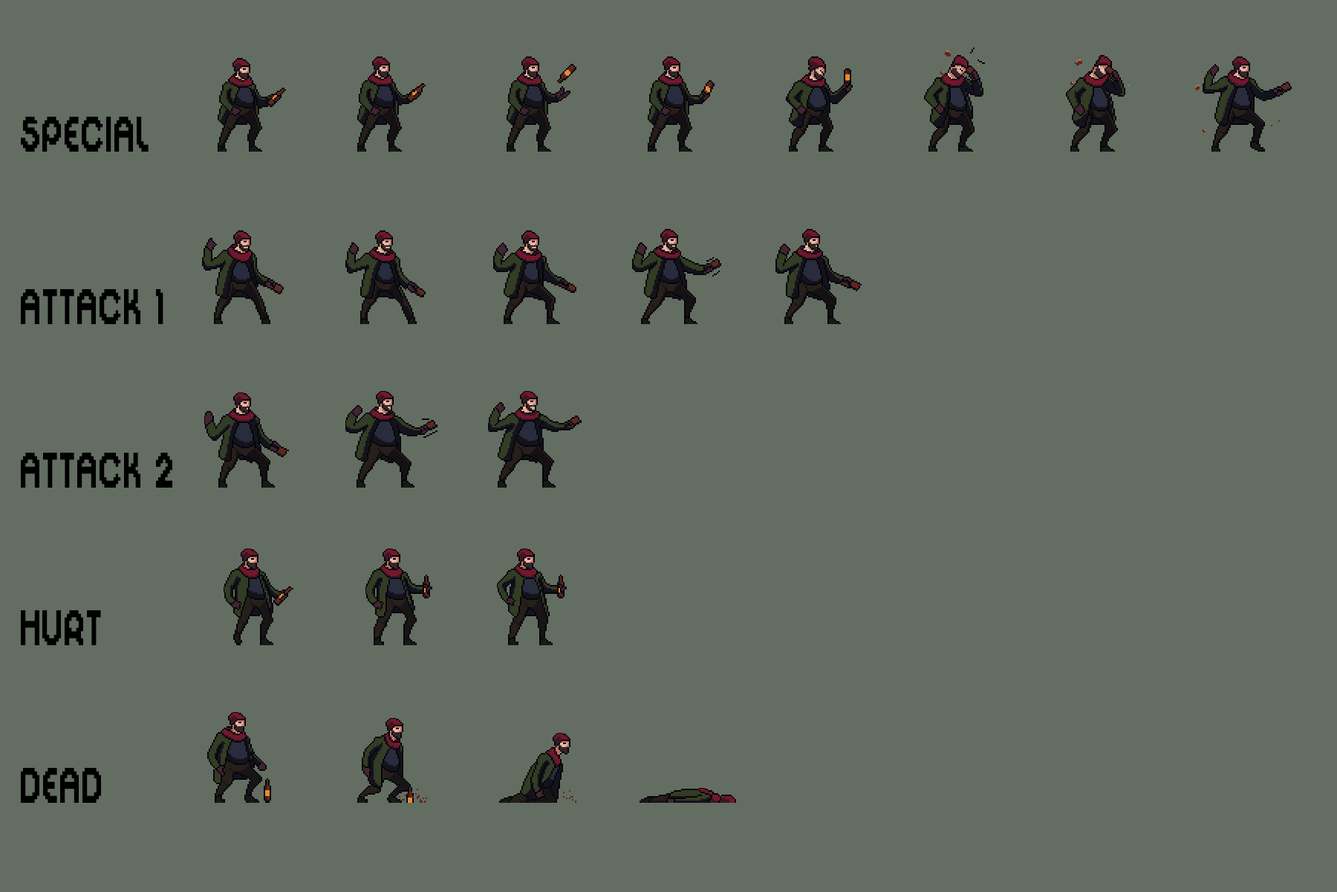
<style>
.page{position:relative;width:1337px;height:892px;background:#636d62}
.page>*{position:absolute;margin:0}
.t1{font:55.7px "DigitalDisco";letter-spacing:0.03em;color:#000000;scale:0.67 1}
</style>
<div class="page">
<p class="t1" style="left:21px;top:117px;width:128px;height:35px">SPECIAL</p>
<p class="t1" style="left:21px;top:289px;width:142px;height:35px">ATTACK 1<br><br> 2 3</p>
<p class="t1" style="left:21px;top:452px;width:151px;height:35px">ATTACK 2</p>
<p class="t1" style="left:21px;top:610px;width:80px;height:35px">HURT</p>
<p class="t1" style="left:21px;top:768px;width:80px;height:34px">DEAD</p>
</div>
